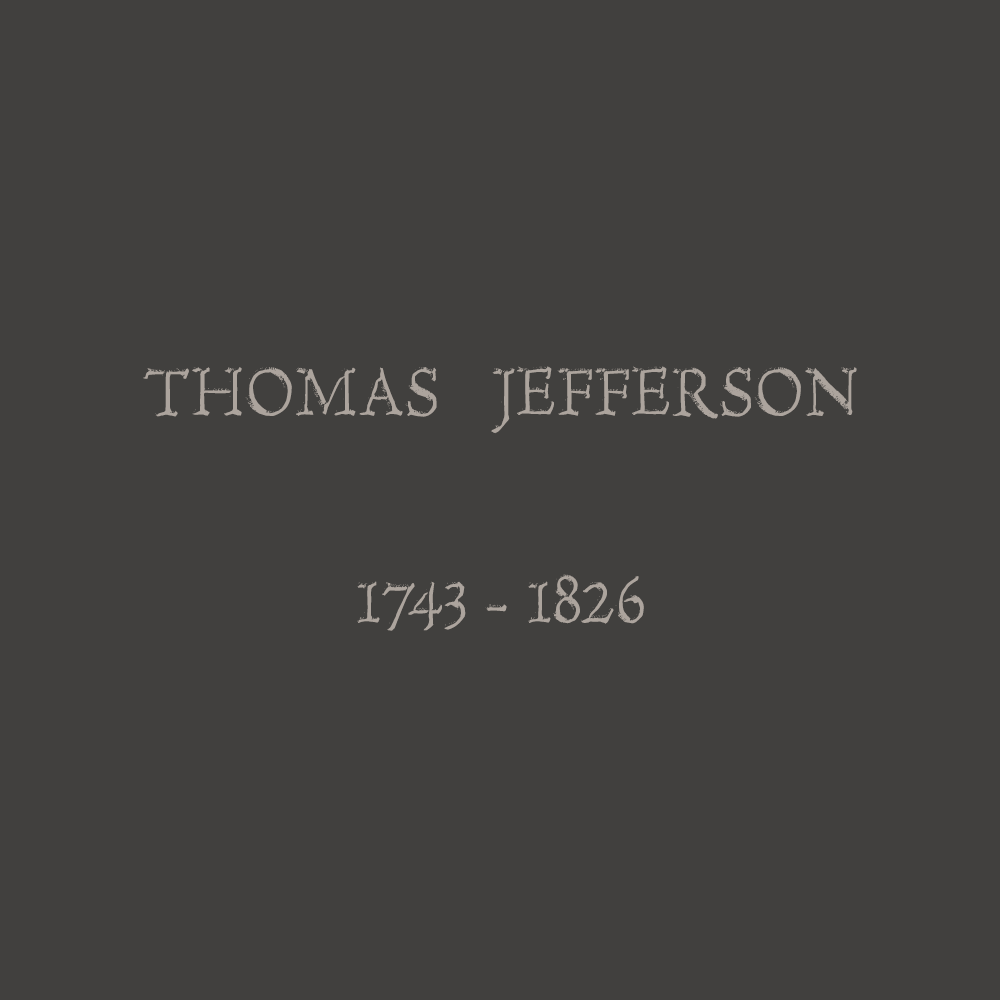
<style>
.page{position:relative;width:1000px;height:1000px;background:#41403e}
.page>*{position:absolute;margin:0}
.t1{font:70px "HultogEngraved";color:#aca49d}
</style>
<div class="page">
<p class="t1" style="left:143px;top:366px;width:714px;height:68px">THOMAS   JEFFERSON</p>
<p class="t1" style="left:357px;top:574px;width:287px;height:57px">1743 - 1826</p>
</div>
